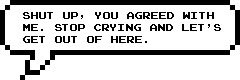
<style>
.page{position:relative;width:240px;height:80px;background:#ffffff}
.page>*{position:absolute;margin:0}
.t1{font:10px "JoystixMonospace-Regular";color:#000000}
</style>
<div class="page">
<p class="t1" style="left:23px;top:12px;width:198px;height:31px">Shut up, you agreed with<br>me. Stop crying and let’s<br>get out of here.</p>
</div>
